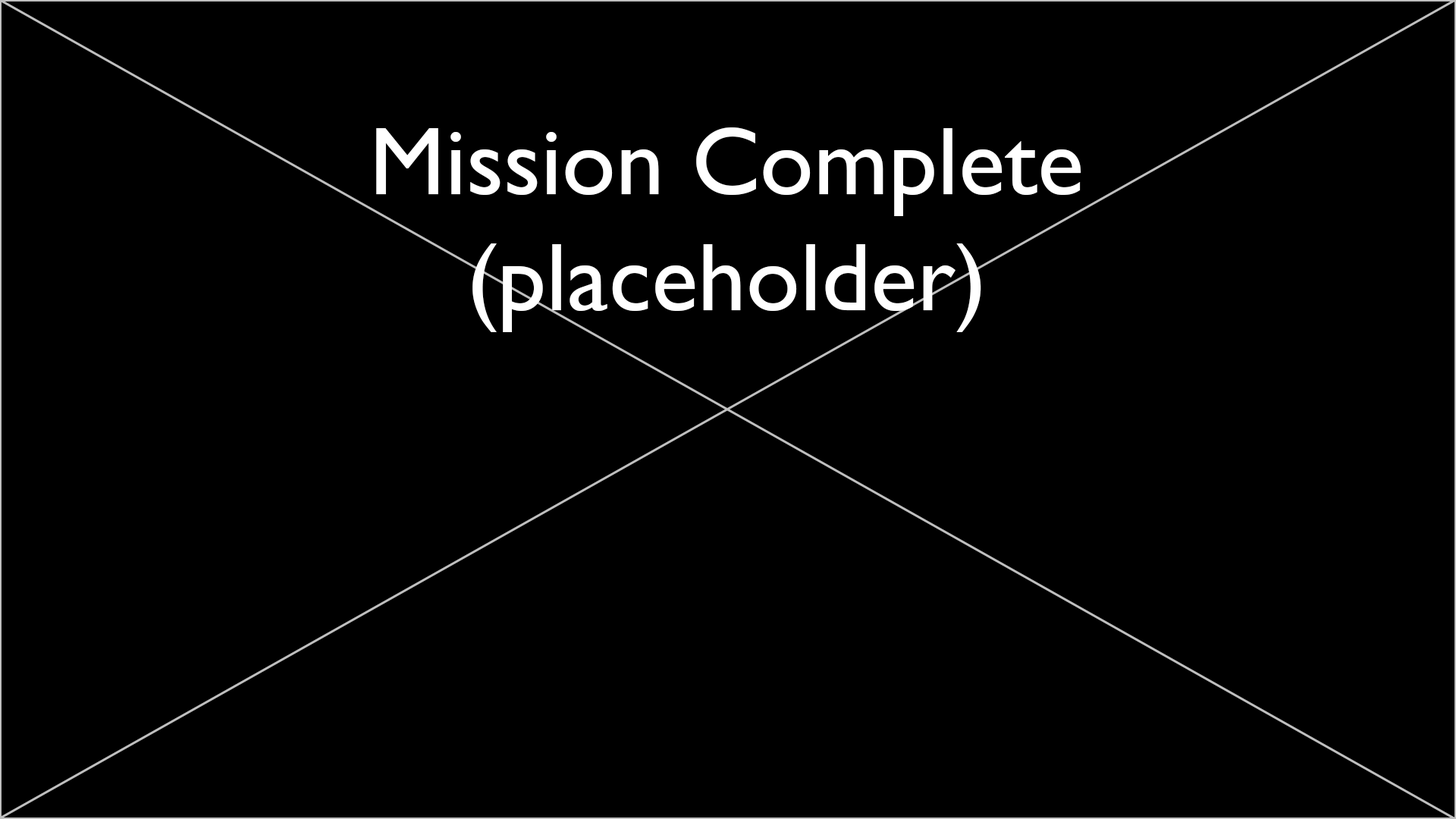
<style>
.page{position:relative;width:1456px;height:819px;background:#000000}
.page>*{position:absolute;margin:0}
.t1{font:97.1px "GillSans";color:#ffffff}
</style>
<div class="page">
<p class="t1" style="left:376px;top:127px;width:705px;height:205px;text-align:center">Mission Complete<br>(placeholder)</p>
</div>
